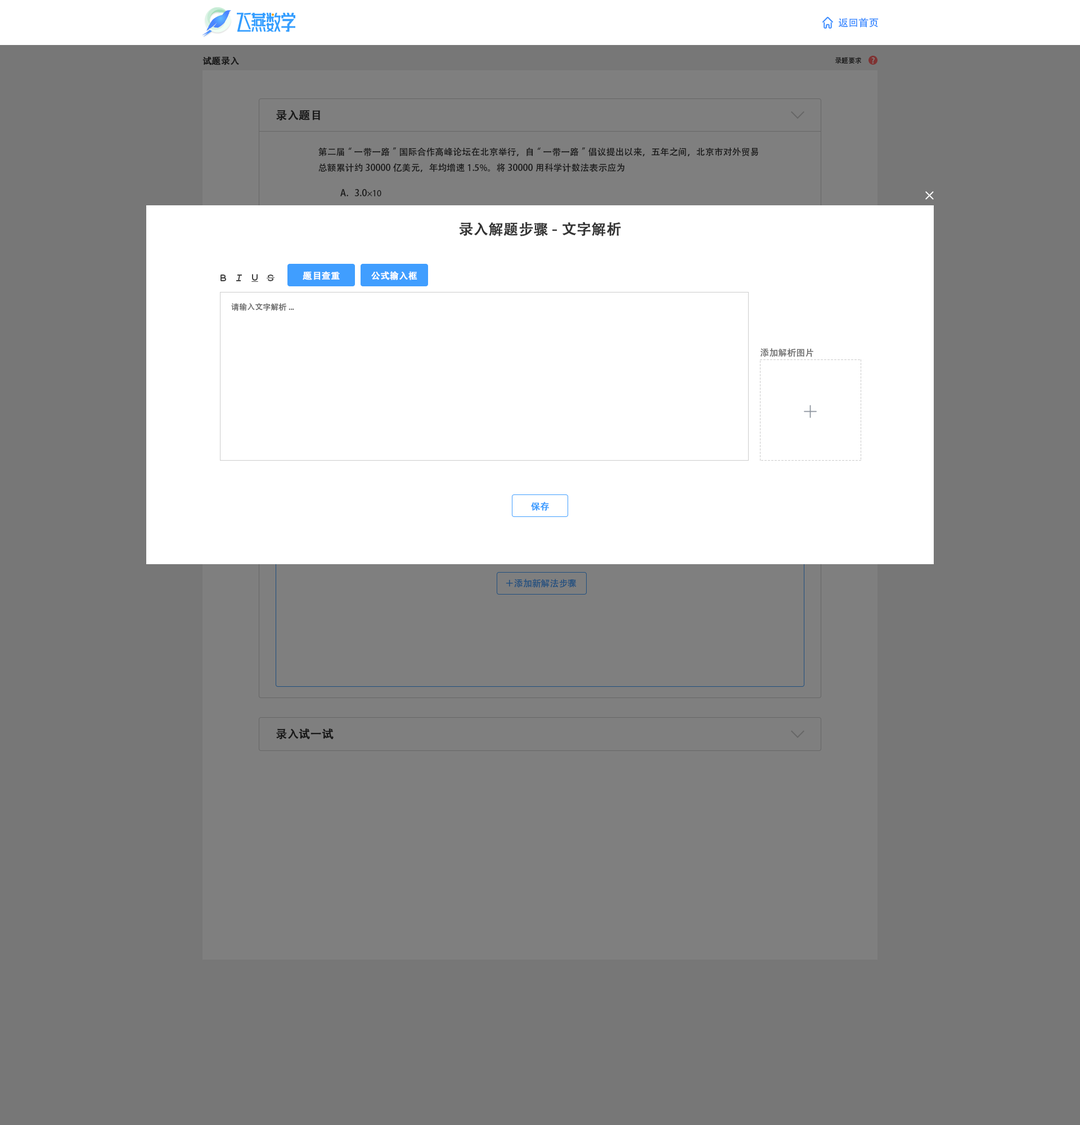
<style>
.page{position:relative;width:1080px;height:1125px;background:#777777}
.page>*{position:absolute;margin:0}
.t1{font:10.1px "AdobeHeitiStd-Regular";color:#408eff}
.t2{font:9px "AdobeHeitiStd-Regular";color:#191919;font-weight:bold}
.t3{font:6.8px "AdobeHeitiStd-Regular";color:#191919}
.t4{font:7.9px "AdobeHeitiStd-Regular";color:#7f7f7f}
.t5{font:11.2px "AdobeHeitiStd-Regular";color:#191919;font-weight:bold}
.t6{font:9px "AdobeHeitiStd-Regular";color:#191919}
.t7{font:9px "MyriadPro-Regular";color:#191919}
.t8{font:14.6px "AdobeHeitiStd-Regular";color:#333333;font-weight:bold}
.t9{font:9px "AdobeHeitiStd-Regular";color:#ffffff;font-weight:bold}
.t10{font:7.9px "AdobeHeitiStd-Regular";color:#666666}
.t11{font:9px "AdobeHeitiStd-Regular";color:#666666}
.t12{font:9px "AdobeHeitiStd-Regular";color:#409eff;font-weight:bold}
.t13{font:9px "AdobeHeitiStd-Regular";color:#204f7f}
</style>
<div class="page">
<p class="t1" style="left:838px;top:17px;width:41px;height:11px">返回首页</p>
<p class="t2" style="left:202px;top:56px;width:37px;height:9px">试题录入</p>
<p class="t3" style="left:835px;top:57px;width:26px;height:7px">录题要求</p>
<p class="t4" style="left:871px;top:57px;width:4px;height:7px">?</p>
<p class="t5" style="left:276px;top:110px;width:44px;height:11px">录入题目</p>
<p class="t6" style="left:318px;top:147px;width:440px;height:25px">第二届“一带一路”国际合作高峰论坛在北京举行，自“一带一路”倡议提出以来，五年之间，北京市对外贸易总额累计约30000亿美元，年均增速1.5%。将30000用科学计数法表示应为</p>
<p class="t6" style="left:340px;top:189px;width:41px;height:7px">A.   3.0<span class="t7">×10</span></p>
<p class="t8" style="left:459px;top:222px;width:162px;height:14px">录入解题步骤-文字解析</p>
<p class="t9" style="left:303px;top:271px;width:37px;height:9px">题目查重</p>
<p class="t9" style="left:371px;top:271px;width:46px;height:9px">公式输入框</p>
<p class="t10" style="left:231px;top:303px;width:63px;height:8px">请输入文字解析...</p>
<p class="t11" style="left:760px;top:348px;width:53px;height:9px">添加解析图片</p>
<p class="t12" style="left:531px;top:502px;width:18px;height:9px">保存</p>
<p class="t13" style="left:506px;top:579px;width:71px;height:9px">＋添加新解法步骤</p>
<p class="t5" style="left:276px;top:728px;width:58px;height:12px">录入试一试</p>
</div>
